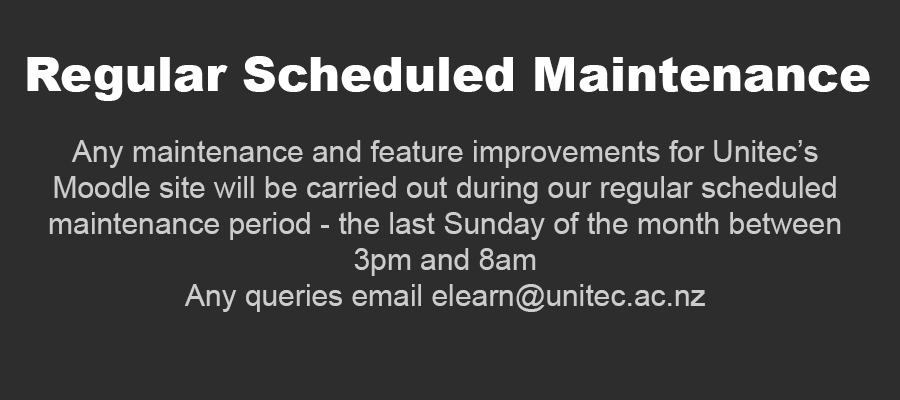
<style>
.page{position:relative;width:900px;height:400px;background:#2d2d2d}
.page>*{position:absolute;margin:0}
.t1{font:48px "Arial-Black";color:#ffffff}
.t2{font:30px "ArialMT";color:#cccccc}
</style>
<div class="page">
<p class="t1" style="left:27px;top:56px;width:843px;height:45px">Regular Scheduled Maintenance</p>
<p class="t2" style="left:49px;top:140px;width:792px;height:172px;text-align:center">Any maintenance and feature improvements for Unitec’s<br>Moodle site will be carried out during our regular scheduled<br>maintenance period - the last Sunday of the month between<br>3pm and 8am<br>Any queries email elearn@unitec.ac.nz</p>
</div>
